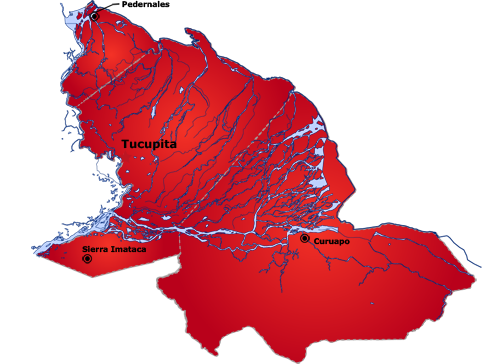
<style>
.page{position:relative;width:482px;height:364px;background:#ffffff}
.page>*{position:absolute;margin:0}
.t1{font:7.7px "Verdana-Bold";color:#000000}
.t2{font:11.5px "Verdana-Bold";color:#000000}
</style>
<div class="page">
<p class="t1" style="left:122px;top:0px;width:48px;height:8px">Pedernales</p>
<p class="t2" style="left:121px;top:139px;width:56px;height:12px">Tucupita</p>
<p class="t1" style="left:82px;top:245px;width:64px;height:8px">Sierra Imataca</p>
<p class="t1" style="left:314px;top:238px;width:36px;height:8px">Curuapo</p>
</div>
